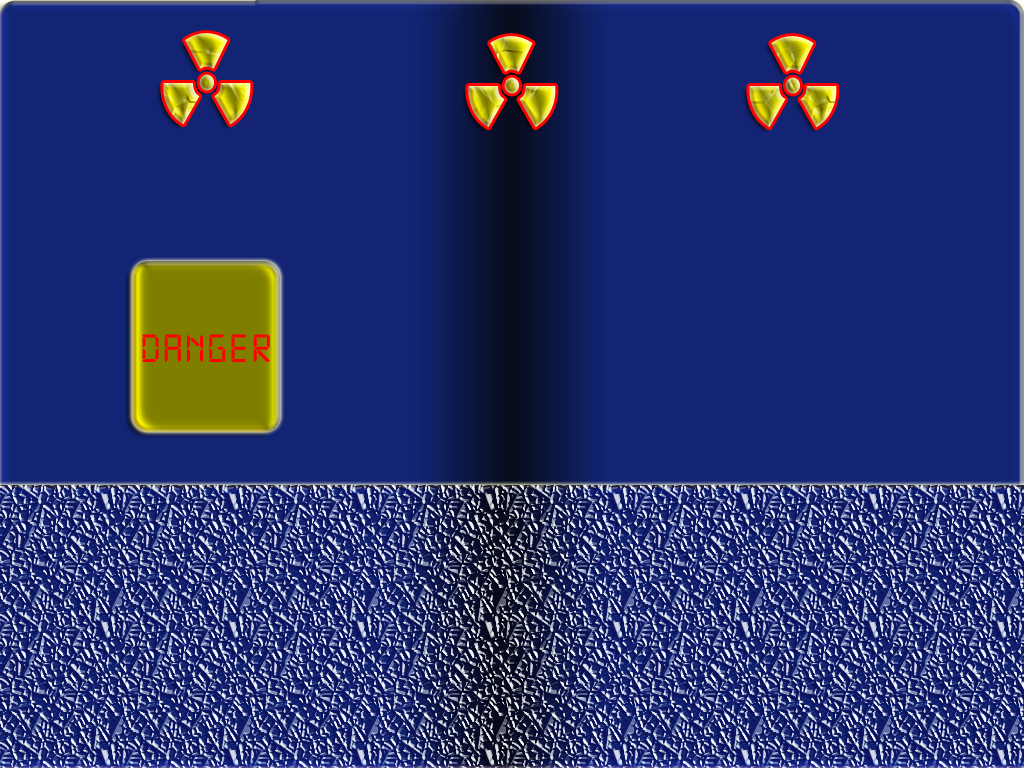
<style>
.page{position:relative;width:1024px;height:768px;background:#122473}
.page>*{position:absolute;margin:0}
.t1{font:42px "Digital-7Mono";letter-spacing:0.075em;color:#ff0000}
</style>
<div class="page">
<p class="t1" style="left:142px;top:334px;width:128px;height:28px">DANGER</p>
</div>
